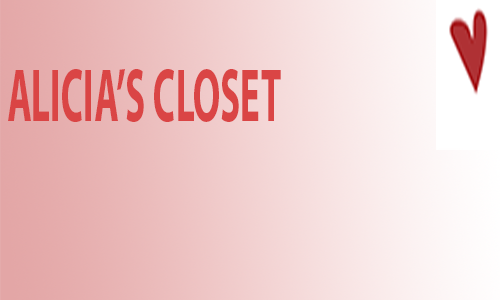
<style>
.page{position:relative;width:500px;height:300px}
.page>*{position:absolute;margin:0}
.t1{font:75px "MyriadPro-Bold";color:#da4545;scale:0.5 1}
</style>
<div class="page">
<p class="t1" style="left:8px;top:69px;width:273px;height:53px">ALICIA’S CLOSET</p>
</div>
